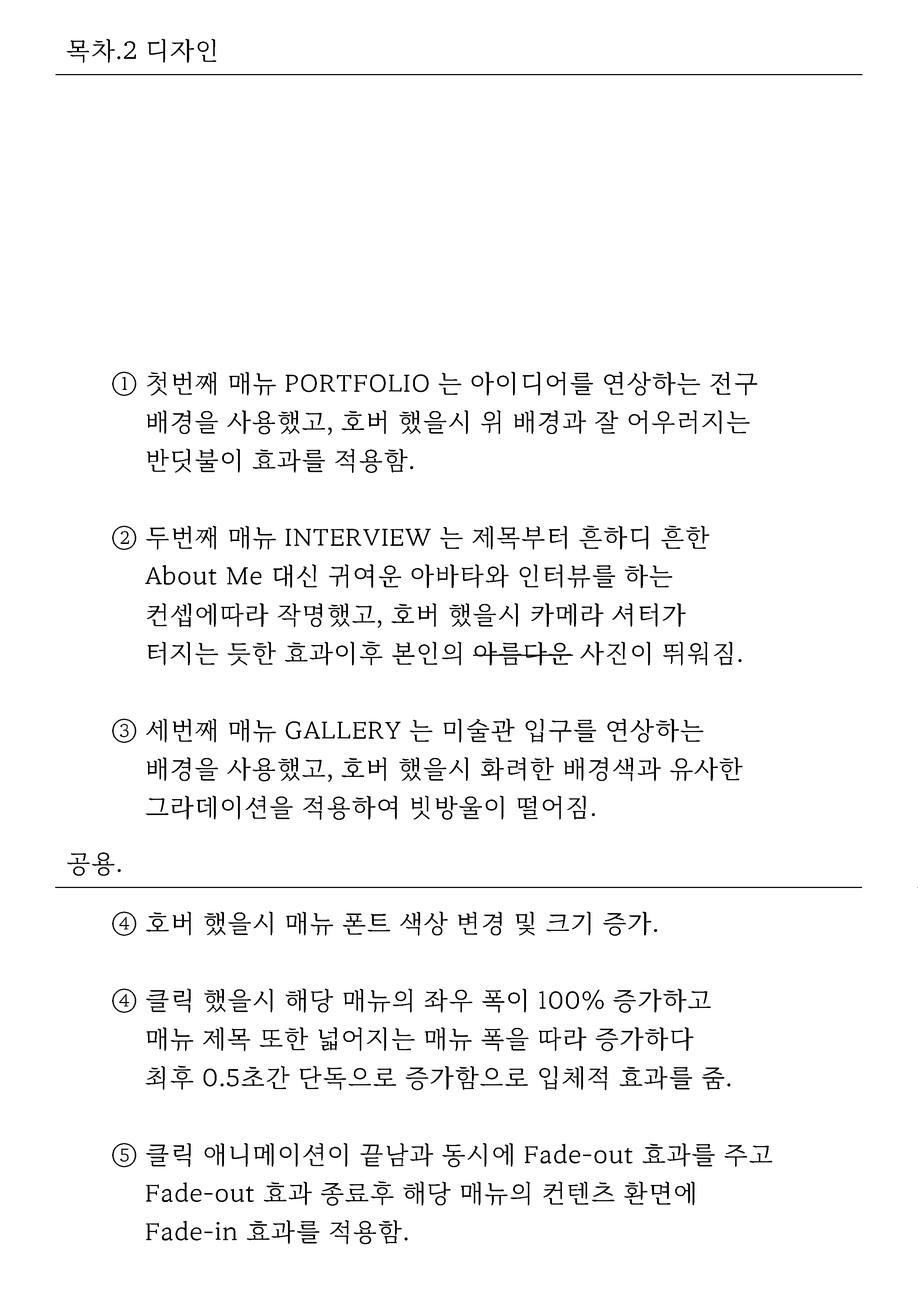
<style>
.page{position:relative;width:918px;height:1299px;background:#ffffff}
.page>*{position:absolute;margin:0}
.t1{font:24.7px "MaruBuri-Regular";letter-spacing:0.04em;color:#000000}
.t2{font:24.7px/38.6px "MaruBuri-Regular";letter-spacing:0.04em;color:#000000}
</style>
<div class="page">
<p class="t1" style="left:67px;top:39px;width:149px;height:24px">목차.2 디자인</p>
<p class="t2" style="left:112px;top:371px;width:660px;height:873px">① 첫번째 매뉴 PORTFOLIO 는 아이디어를 연상하는 전구<br>   배경을 사용했고, 호버 했을시 위 배경과 잘 어우러지는<br>   반딧불이 효과를 적용함.<br><br>② 두번째 매뉴 INTERVIEW 는 제목부터 흔하디 흔한 <br>   About Me 대신 귀여운 아바타와 인터뷰를 하는 <br>   컨셉에따라 작명했고, 호버 했을시 카메라 셔터가<br>   터지는 듯한 효과이후 본인의 아름다운 사진이 뛰워짐.<br><br>③ 세번째 매뉴 GALLERY 는 미술관 입구를 연상하는<br>   배경을 사용했고, 호버 했을시 화려한 배경색과 유사한<br>   그라데이션을 적용하여 빗방울이 떨어짐.<br><br> <br>④ 호버 했을시 매뉴 폰트 색상 변경 및 크기 증가.  <br><br>④ 클릭 했을시 해당 매뉴의 좌우 폭이 100% 증가하고<br>   매뉴 제목 또한 넓어지는 매뉴 폭을 따라 증가하다<br>   최후 0.5초간 단독으로 증가함으로 입체적 효과를 줌.  <br><br>⑤ 클릭 애니메이션이 끝남과 동시에 Fade-out 효과를 주고<br>   Fade-out 효과 종료후 해당 매뉴의 컨텐츠 환면에 <br>   Fade-in 효과를 적용함.</p>
<p class="t1" style="left:67px;top:852px;width:54px;height:24px">공용.</p>
</div>
